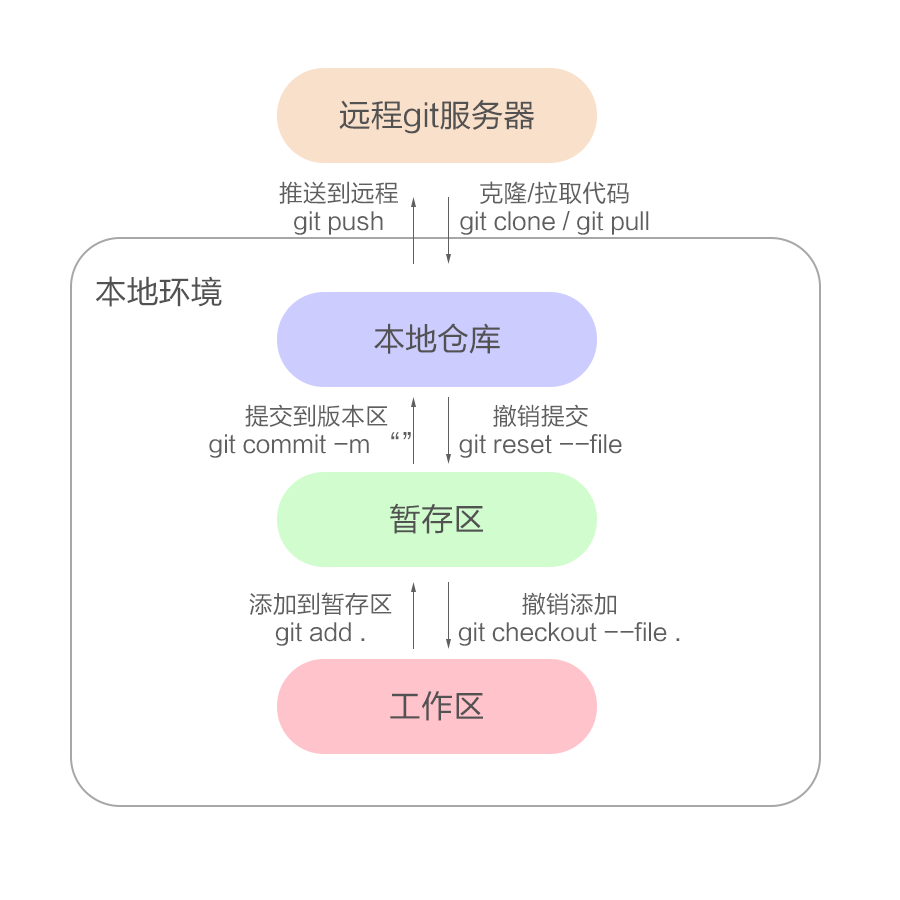
<style>
.page{position:relative;width:900px;height:900px;background:#ffffff}
.page>*{position:absolute;margin:0}
.t1{font:32px "FZLTHJW--GB1-0";color:#525252}
.t2{font:24px/28px "FZLTHJW--GB1-0";color:#5f5f5f}
</style>
<div class="page">
<p class="t1" style="left:339px;top:99px;width:195px;height:35px">远程git服务器</p>
<p class="t2" style="left:279px;top:181px;width:119px;height:54px;text-align:center">推送到远程<br>git push</p>
<p class="t2" style="left:460px;top:181px;width:189px;height:54px;text-align:center">克隆/拉取代码<br>git clone / git pull</p>
<p class="t1" style="left:95px;top:276px;width:127px;height:31px">本地环境</p>
<p class="t1" style="left:374px;top:323px;width:126px;height:31px">本地仓库</p>
<p class="t2" style="left:209px;top:404px;width:202px;height:54px;text-align:center">提交到版本区<br>git commit -m “”</p>
<p class="t2" style="left:459px;top:404px;width:163px;height:54px;text-align:center">撤销提交<br>git reset --file</p>
<p class="t1" style="left:390px;top:503px;width:93px;height:31px">暂存区</p>
<p class="t2" style="left:249px;top:592px;width:143px;height:54px;text-align:center">添加到暂存区<br>git add .</p>
<p class="t2" style="left:458px;top:592px;width:222px;height:54px;text-align:center">撤销添加<br>git checkout --file .</p>
<p class="t1" style="left:390px;top:691px;width:93px;height:30px">工作区</p>
</div>
